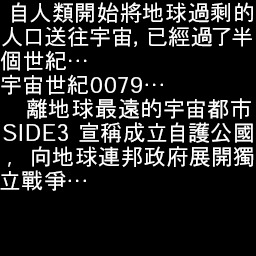
<style>
.page{position:relative;width:256px;height:256px;background:#000000}
.page>*{position:absolute;margin:0}
.t1{font:22px "HeiseiKakuGoStd-W3";letter-spacing:0.06em;color:#ffffff}
.t2{font:22.9px "HeiseiKakuGoStd-W3";letter-spacing:0.06em;color:#ffffff;scale:0.96 1}
</style>
<div class="page">
<p class="t1" style="left:12px;top:2px;width:241px;height:21px">自人類開始將地球過剩的</p>
<p class="t1" style="left:2px;top:26px;width:250px;height:21px">人口送往宇宙，已經過了半</p>
<p class="t1" style="left:0px;top:50px;width:87px;height:21px">個世紀…</p>
<p class="t1" style="left:1px;top:74px;width:162px;height:21px">宇宙世紀0079…</p>
<p class="t1" style="left:27px;top:98px;width:224px;height:21px">離地球最遠的宇宙都市</p>
<p class="t1" style="left:3px;top:122px;width:250px;height:21px">SIDE<span class="t2">3</span> 宣稱成立自護公國</p>
<p class="t1" style="left:8px;top:146px;width:246px;height:21px">,  向地球連邦政府展開獨</p>
<p class="t1" style="left:0px;top:170px;width:86px;height:21px">立戰爭…</p>
</div>
